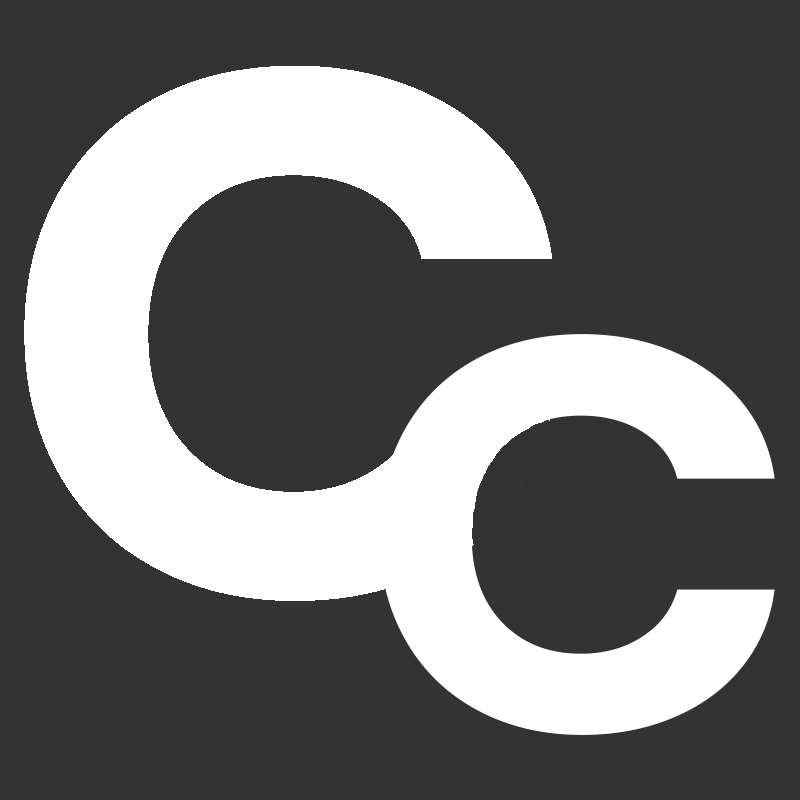
<style>
.page{position:relative;width:800px;height:800px;background:#333333}
.page>*{position:absolute;margin:0}
.t1{font:600px "Gelion-Bold";color:#ffffff}
</style>
<div class="page">
<p class="t1" style="left:379px;top:334px;width:396px;height:401px">C</p>
</div>
